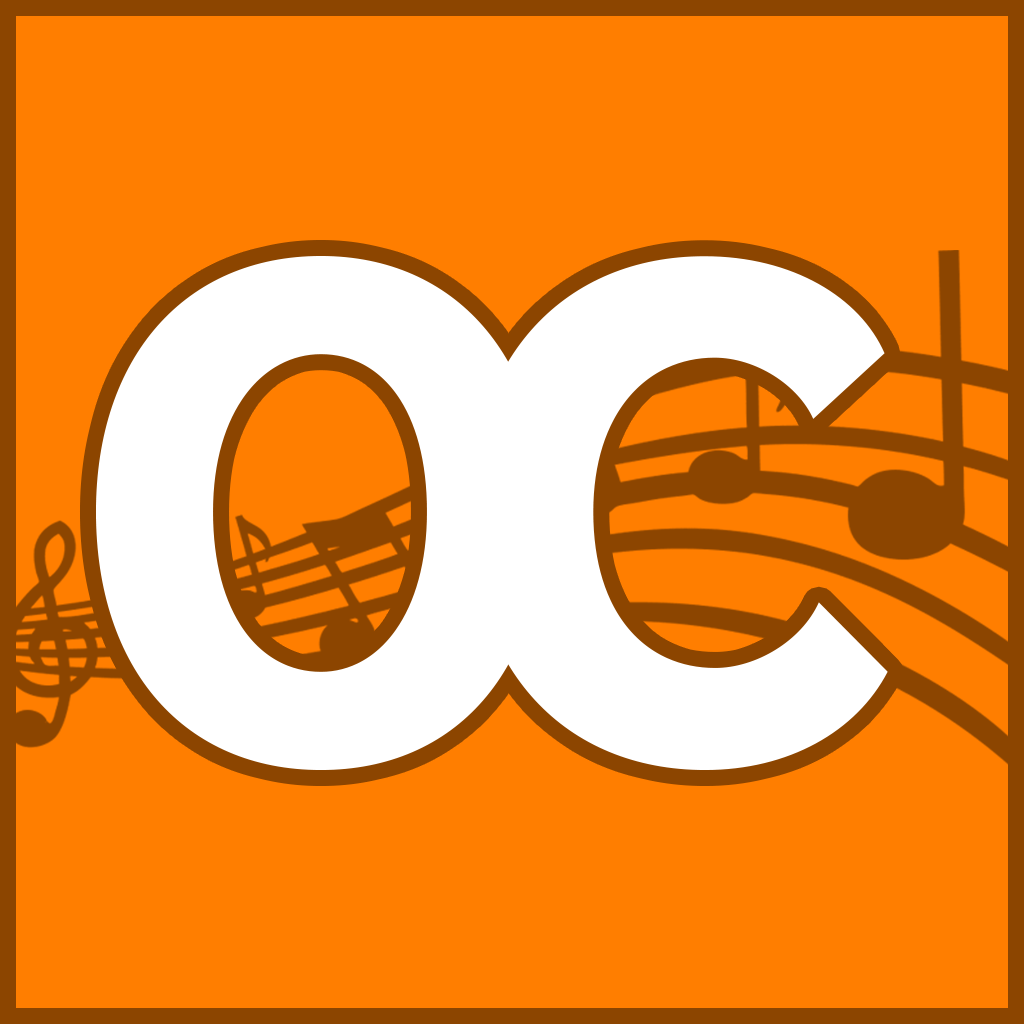
<style>
.page{position:relative;width:1024px;height:1024px;background:#ff7e00}
.page>*{position:absolute;margin:0}
.t1{font:625px "RodinMariaPro-EB";letter-spacing:-0.2em;color:#ffffff}
</style>
<div class="page">
<p class="t1" style="left:95px;top:256px;width:449px;height:514px">O</p>
<p class="t1" style="left:469px;top:256px;width:419px;height:514px">C</p>
</div>
